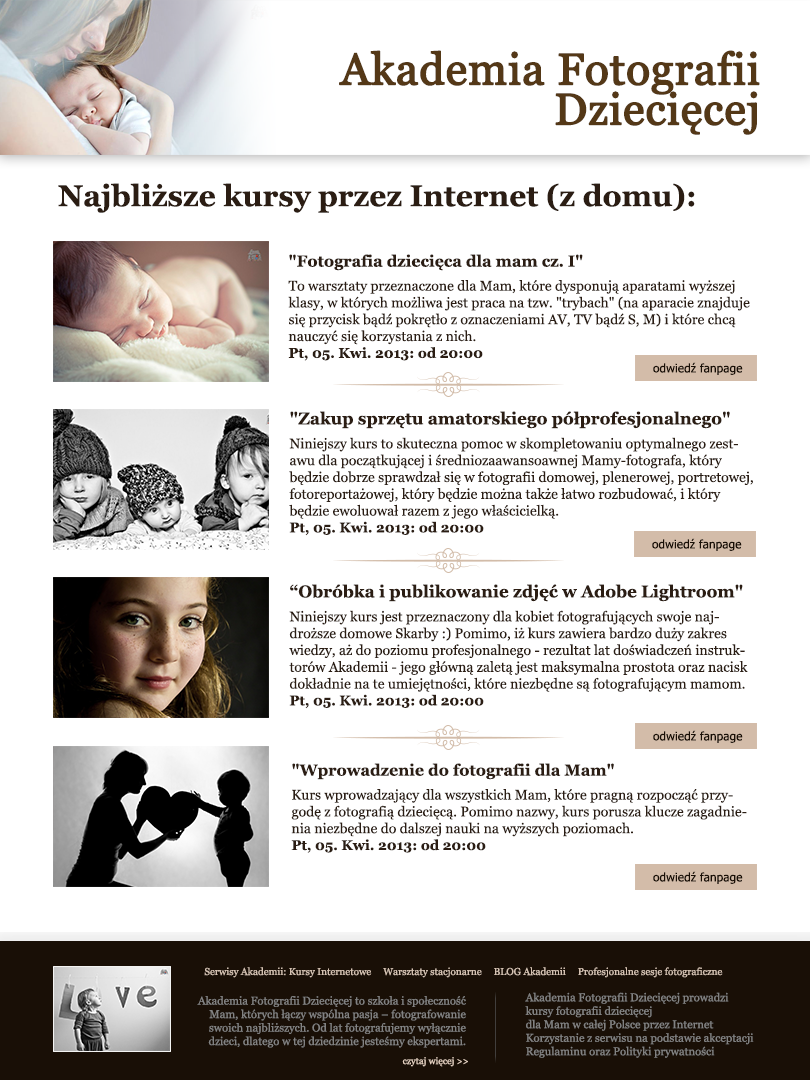
<style>
.page{position:relative;width:810px;height:1080px;background:#ffffff}
.page>*{position:absolute;margin:0}
.t1{font:44px/40px "Georgia";color:#543817;font-weight:bold}
.t2{font:30px "Georgia-Bold";color:#2b1d13}
.t3{font:14px "Georgia";color:#2b1d13}
.t4{font:16px "Georgia-Bold";color:#2b1d13}
.t5{font:14px/24px "Georgia";color:#2b1d13}
.t6{font:14px "Georgia-Bold";color:#2b1d13}
.t7{font:11.8px "Tahoma";letter-spacing:0.01em;color:#190f06}
.t8{font:17px "Georgia-Bold";color:#2b1d13}
.t9{font:10px "Georgia";color:#d5c2b2}
.t10{font:11.2px "Georgia";color:#828282}
.t11{font:9.4px/5.6px "Georgia";color:#e7d2c1}
</style>
<div class="page">
<p class="t1" style="left:339px;top:50px;width:421px;height:85px;text-align:right">Akademia Fotografii<br>Dziecięcej</p>
<p class="t2" style="left:58px;top:183px;width:637px;height:30px">Najbliższe kursy przez Internet (z domu):</p>
<p class="t3" style="left:288px;top:254px;width:462px;height:107px"><span class="t4">"Fotografia dziecięca dla mam cz. I"<br></span><span class="t5">To warsztaty przeznaczone dla Mam, które dysponują aparatami wyższej</span> klasy, w których możliwa jest praca na tzw. "trybach" (na aparacie znajduje się przycisk bądź pokrętło z oznaczeniami AV, TV bądź S, M) i które chcą nauczyć się korzystania z nich.<br><span class="t6">Pt, 05. Kwi. 2013: od 20:00</span></p>
<p class="t7" style="left:653px;top:362px;width:90px;height:13px">odwiedź fanpage</p>
<p class="t3" style="left:289px;top:411px;width:464px;height:125px"><span class="t8">"Zakup sprzętu amatorskiego półprofesjonalnego" <br></span><span class="t5">Niniejszy kurs to skuteczna pomoc w skompletowaniu op</span>tymalnego zestawu dla początkującej i średniozaawansoawnej Mamy-fotografa, który będzie dobrze sprawdzał się w fotografii domowej, plenerowej, portretowej, fotoreportażowej, który będzie można także łatwo rozbudować, i który będzie ewoluował razem z jego właścicielką. <br><span class="t6">Pt, 05. Kwi. 2013: od 20:00</span></p>
<p class="t7" style="left:652px;top:538px;width:90px;height:13px">odwiedź fanpage</p>
<p class="t3" style="left:289px;top:584px;width:459px;height:125px"><span class="t8">“Obróbka i publikowanie zdjęć w Adobe Lightroom"<br></span><span class="t5">Niniejszy kurs jest przeznaczony dla kobiet fotografujących swoje naj</span>droższe domowe Skarby :) Pomimo, iż kurs zawiera bardzo duży zakres wiedzy, aż do poziomu profesjonalnego - rezultat lat doświadczeń instruktorów Akademii - jego główną zaletą jest maksymalna prostota oraz nacisk dokładnie na te umiejętności, które niezbędne są fotografującym mamom.<br><span class="t6">Pt, 05. Kwi. 2013: od 20:00</span></p>
<p class="t7" style="left:653px;top:730px;width:90px;height:13px">odwiedź fanpage</p>
<p class="t3" style="left:291px;top:763px;width:456px;height:90px"><span class="t4">"Wprowadzenie do fotografii dla Mam"<br></span><span class="t5">Kurs wprowadzający dla wszystkich Mam, które pragną rozpocząć przy</span>godę z fotografią dziecięcą. Pomimo nazwy, kurs porusza klucze zagadnienia niezbędne do dalszej nauki na wyższych poziomach.<br><span class="t6">Pt, 05. Kwi. 2013: od 20:00</span></p>
<p class="t7" style="left:653px;top:871px;width:90px;height:13px">odwiedź fanpage</p>
<p class="t9" style="left:204px;top:967px;width:519px;height:11px">Serwisy Akademii: Kursy Internetowe     Warsztaty stacjonarne     BLOG Akademii     Profesjonalne sesje fotograficzne</p>
<p class="t10" style="left:197px;top:996px;width:271px;height:71px;text-align:right">Akademia Fotografii Dziecięcej to szkoła i społeczność <br>Mam, których łączy wspólna pasja – fotografowanie <br>swoich najbliższych. Od lat fotografujemy wyłącznie <br>dzieci, dlatego w tej dziedzinie jesteśmy ekspertami. <br><br><span class="t11">czytaj więcej &gt;&gt;</span></p>
<p class="t10" style="left:525px;top:992px;width:229px;height:66px">Akademia Fotografii Dziecięcej prowadzi <br>kursy fotografii dziecięcej <br>dla Mam w całej Polsce przez Internet<br>Korzystanie z serwisu na podstawie akceptacji <br>Regulaminu oraz Polityki prywatności</p>
</div>
